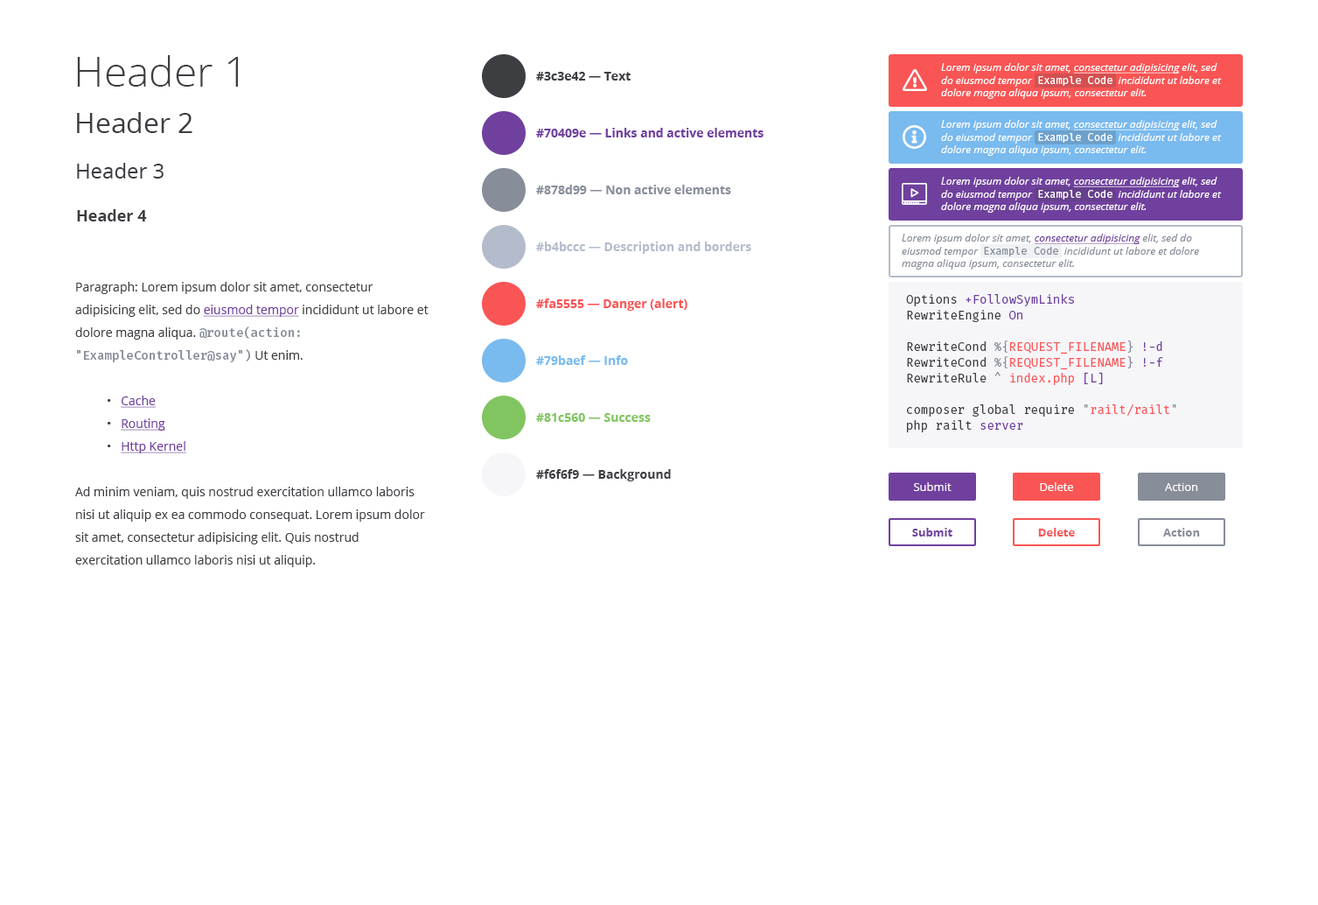
<style>
.page{position:relative;width:1318px;height:905px;background:#ffffff}
.page>*{position:absolute;margin:0}
.t1{font:42px "OpenSans-Light";color:#3c3e42}
.t2{font:10.5px "OpenSans-Italic";color:#ffffff}
.t3{font:10.5px "OpenSans-Italic";color:#ffffff;text-decoration:underline}
.t4{font:10.5px "FiraCode-Regular";color:#ffffff}
.t5{font:12.2px "OpenSans-Bold";color:#3c3e42}
.t6{font:28px "OpenSans";color:#3c3e42}
.t7{font:12.2px "OpenSans-Bold";color:#70409e}
.t8{font:21px "OpenSans";color:#3c3e42}
.t9{font:12.2px "OpenSans-Bold";color:#878d99}
.t10{font:15.7px "OpenSans-Bold";color:#3c3e42}
.t11{font:10.5px "OpenSans-Italic";color:#878d99}
.t12{font:10.5px "OpenSans-Italic";color:#70409e;text-decoration:underline}
.t13{font:10.5px "FiraCode-Regular";color:#878d99}
.t14{font:12.2px "OpenSans-Bold";color:#b4bccc}
.t15{font:12.2px/22.7px "OpenSans";color:#3c3e42}
.t16{font:12.2px/22.7px "OpenSans";color:#70409e;text-decoration:underline}
.t17{font:12.2px/22.7px "FiraCode-Medium";color:#878d99}
.t18{font:12.2px/15.7px "FiraCode-Regular";color:#3c3e42}
.t19{font:12.2px/15.7px "FiraCode-Regular";color:#70409e}
.t20{font:12.2px/15.7px "FiraCode-Regular";color:#878d99}
.t21{font:12.2px/15.7px "FiraCode-Regular";color:#fa5555}
.t22{font:12.2px "OpenSans-Bold";color:#fa5555}
.t23{font:12.2px "OpenSans-Bold";color:#79baef}
.t24{font:12.2px "OpenSans-Bold";color:#81c560}
.t25{font:11.4px "OpenSans";color:#ffffff}
.t26{font:11.4px "OpenSans-Bold";color:#70409e}
.t27{font:11.4px "OpenSans-Bold";color:#fa5555}
.t28{font:11.4px "OpenSans-Bold";color:#878d99}
</style>
<div class="page">
<p class="t1" style="left:77px;top:55px;width:161px;height:32px">Header 1</p>
<p class="t2" style="left:941px;top:63px;width:281px;height:36px">Lorem ipsum dolor sit amet, <span class="t3">consectetur adipisicing</span> elit, sed do eiusmod tempor  <span class="t4">Example Code</span>  incididunt ut labore et dolore magna aliqua ipsum, consectetur elit.</p>
<p class="t5" style="left:536px;top:72px;width:95px;height:8px">#3c3e42 — Text</p>
<p class="t6" style="left:77px;top:112px;width:115px;height:21px">Header 2</p>
<p class="t2" style="left:941px;top:120px;width:281px;height:36px">Lorem ipsum dolor sit amet, <span class="t3">consectetur adipisicing</span> elit, sed do eiusmod tempor  <span class="t4">Example Code</span>  incididunt ut labore et dolore magna aliqua ipsum, consectetur elit.</p>
<p class="t7" style="left:536px;top:128px;width:228px;height:9px">#70409e — Links and active elements</p>
<p class="t8" style="left:77px;top:163px;width:87px;height:15px">Header 3</p>
<p class="t9" style="left:536px;top:185px;width:195px;height:9px">#878d99 — Non active elements</p>
<p class="t2" style="left:941px;top:177px;width:281px;height:36px">Lorem ipsum dolor sit amet, <span class="t3">consectetur adipisicing</span> elit, sed do eiusmod tempor  <span class="t4">Example Code</span>  incididunt ut labore et dolore magna aliqua ipsum, consectetur elit.</p>
<p class="t10" style="left:77px;top:209px;width:70px;height:12px">Header 4</p>
<p class="t11" style="left:902px;top:234px;width:297px;height:35px">Lorem ipsum dolor sit amet, <span class="t12">consectetur adipisicing</span> elit, sed do eiusmod tempor  <span class="t13">Example Code</span>  incididunt ut labore et dolore magna aliqua ipsum, consectetur elit.</p>
<p class="t14" style="left:536px;top:241px;width:215px;height:13px">#b4bccc — Description and borders</p>
<p class="t15" style="left:75px;top:282px;width:354px;height:285px">Paragraph: Lorem ipsum dolor sit amet, consectetur adipisicing elit, sed do <span class="t16">eiusmod tempor</span> incididunt ut labore et dolore magna aliqua. <span class="t17">@route(action: "ExampleController@say")</span> Ut enim. <br><br> •   <span class="t16">Cache<br> </span>•   <span class="t16">Routing<br> </span>•   <span class="t16">Http Kernel<br><br></span>Ad minim veniam, quis nostrud exercitation ullamco laboris nisi ut aliquip ex ea commodo consequat. Lorem ipsum dolor sit amet, consectetur adipisicing elit. Quis nostrud exercitation ullamco laboris nisi ut aliquip.</p>
<p class="t18" style="left:906px;top:294px;width:271px;height:138px">Options <span class="t19">+FollowSymLinks<br></span>RewriteEngine <span class="t19">On<br></span><br>RewriteCond <span class="t20">%{</span><span class="t21">REQUEST_FILENAME</span><span class="t20">} </span><span class="t19">!-d<br></span>RewriteCond <span class="t20">%{</span><span class="t21">REQUEST_FILENAME</span><span class="t20">} </span><span class="t19">!-f<br></span>RewriteRule <span class="t20">^ </span><span class="t21">index.php </span><span class="t19">[L]<br></span><br>composer global require <span class="t20">"</span><span class="t21">railt/railt</span><span class="t20">"<br></span>php railt <span class="t19">server</span></p>
<p class="t22" style="left:536px;top:298px;width:152px;height:13px">#fa5555 — Danger (alert)</p>
<p class="t23" style="left:536px;top:355px;width:92px;height:10px">#79baef — Info</p>
<p class="t24" style="left:536px;top:413px;width:115px;height:9px">#81c560 — Success</p>
<p class="t5" style="left:536px;top:469px;width:135px;height:12px">#f6f6f9 — Background</p>
<p class="t25" style="left:914px;top:482px;width:38px;height:9px">Submit</p>
<p class="t25" style="left:1040px;top:482px;width:33px;height:9px">Delete</p>
<p class="t25" style="left:1165px;top:483px;width:33px;height:8px">Action</p>
<p class="t26" style="left:912px;top:527px;width:41px;height:9px">Submit</p>
<p class="t27" style="left:1038px;top:527px;width:37px;height:9px">Delete</p>
<p class="t28" style="left:1163px;top:527px;width:37px;height:9px">Action</p>
</div>
